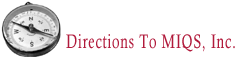
<style>
.page{position:relative;width:250px;height:57px;background:#ffffff}
.page>*{position:absolute;margin:0}
.t1{font:19.6px "CalistoMT";letter-spacing:0.05em;color:#b11a3b;scale:0.71 1}
</style>
<div class="page">
<p class="t1" style="left:66px;top:34px;width:169px;height:18px">Directions To MIQS, Inc.</p>
</div>
